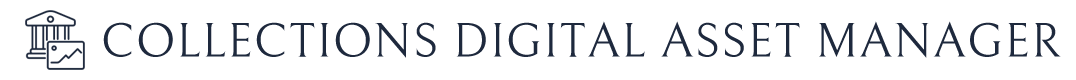
<style>
.page{position:relative;width:1076px;height:80px;background:#ffffff}
.page>*{position:absolute;margin:0}
.t1{font:48px "Bellefair-Regular";letter-spacing:0.025em;color:#1e293d;text-transform:uppercase}
</style>
<div class="page">
<p class="t1" style="left:103px;top:21px;width:958px;height:37px">Collections Digital Asset Manager</p>
</div>
